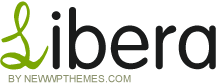
<style>
.page{position:relative;width:216px;height:84px;background:#ffffff}
.page>*{position:absolute;margin:0}
.t1{font:80px "VoguePlain";color:#1a1b1b}
.t2{font:90px "Iphegenia";color:#7aa603}
.t3{font:10px "ArialMT";color:#8b926d;text-transform:uppercase}
</style>
<div class="page">
<p class="t1" style="left:0px;top:1px;width:216px;height:69px"><span class="t2">L</span>ibera</p>
<p class="t3" style="left:8px;top:75px;width:123px;height:8px">by NewWpThemes.com</p>
</div>
